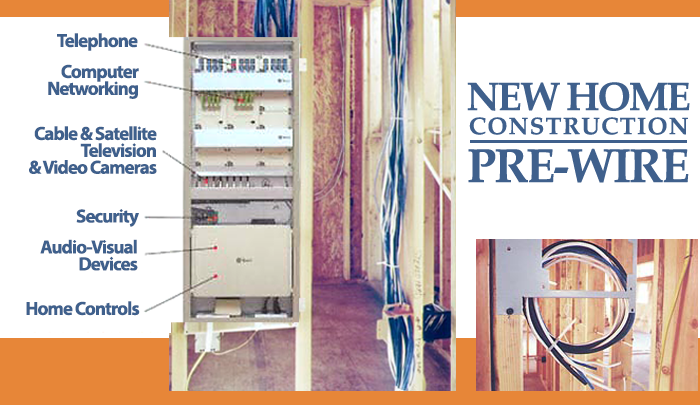
<style>
.page{position:relative;width:700px;height:405px;background:#ffffff}
.page>*{position:absolute;margin:0}
.t1{font:19px "MyriadPro-Bold";letter-spacing:-0.05em;color:#3f608c}
.t2{font:19px/16.9px "MyriadPro-Bold";letter-spacing:-0.05em;color:#3f608c}
</style>
<div class="page">
<p class="t1" style="left:57px;top:33px;width:81px;height:18px">Telephone</p>
<p class="t2" style="left:48px;top:64px;width:91px;height:35px;text-align:right">Computer<br>Networking</p>
<p class="t2" style="left:29px;top:126px;width:128px;height:48px;text-align:right">Cable &amp; Satellite<br>Television<br>&amp; Video Cameras</p>
<p class="t1" style="left:76px;top:209px;width:63px;height:18px">Security</p>
<p class="t2" style="left:40px;top:239px;width:98px;height:32px;text-align:right">Audio-Visual<br>Devices</p>
<p class="t1" style="left:26px;top:301px;width:114px;height:15px">Home Controls</p>
</div>
